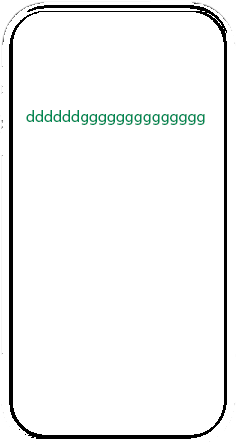
<style>
.page{position:relative;width:237px;height:448px;background:#ffffff}
.page>*{position:absolute;margin:0}
.t1{font:12px "MyriadPro-Regular";color:#008853}
</style>
<div class="page">
<p class="t1" style="left:26px;top:110px;width:179px;height:15px">ddddddgggggggggggggg</p>
</div>
